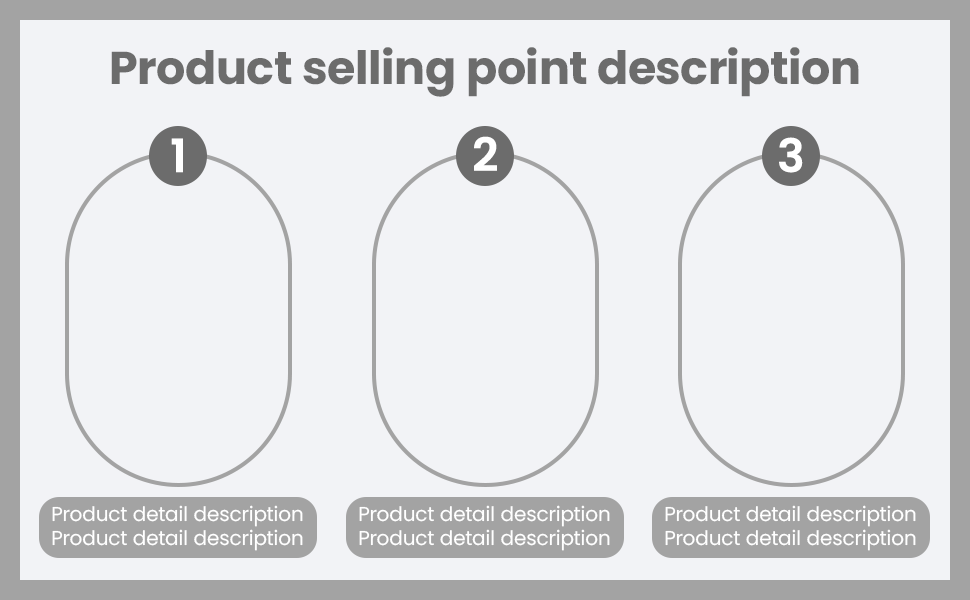
<style>
.page{position:relative;width:970px;height:600px;background:#f2f3f6}
.page>*{position:absolute;margin:0}
.t1{font:46px "Poppins-Bold";color:#6c6c6c}
.t2{font:46px "Poppins-SemiBold";color:#ffffff;text-transform:uppercase}
.t3{font:20px "Poppins-Regular";color:#ffffff}
</style>
<div class="page">
<p class="t1" style="left:111px;top:47px;width:748px;height:50px">Product selling point description</p>
<p class="t2" style="left:474px;top:136px;width:23px;height:35px">2</p>
<p class="t2" style="left:779px;top:137px;width:24px;height:36px">3</p>
<p class="t2" style="left:171px;top:138px;width:12px;height:35px">1</p>
<p class="t3" style="left:52px;top:505px;width:251px;height:46px">Product detail description<br>Product detail description</p>
<p class="t3" style="left:359px;top:505px;width:251px;height:46px">Product detail description<br>Product detail description</p>
<p class="t3" style="left:665px;top:505px;width:251px;height:46px">Product detail description<br>Product detail description</p>
</div>
